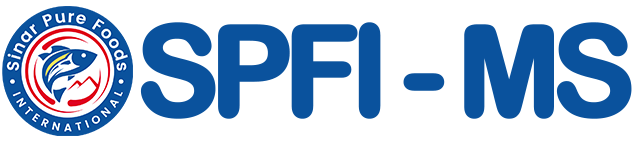
<style>
.page{position:relative;width:636px;height:142px;background:#ffffff}
.page>*{position:absolute;margin:0}
.t1{font:125px "ArialRoundedMTBold";letter-spacing:-0.1em;color:#0a529d;font-weight:bold}
</style>
<div class="page">
<p class="t1" style="left:140px;top:22px;width:492px;height:97px">SPFI - MS</p>
</div>
